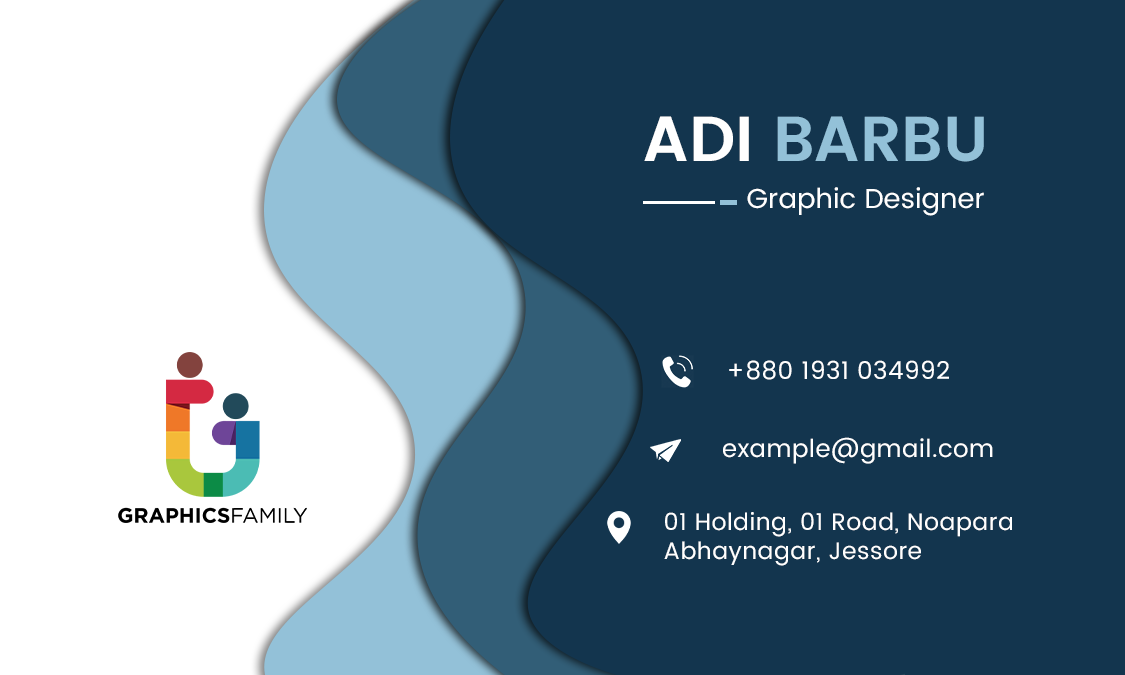
<style>
.page{position:relative;width:1125px;height:675px;background:#13354e}
.page>*{position:absolute;margin:0}
.t1{font:63.5px "Poppins-SemiBold";color:#93c1d8;text-transform:uppercase}
.t2{font:63.5px "Poppins-SemiBold";color:#ffffff;text-transform:uppercase}
.t3{font:27.4px "Poppins-Regular";color:#ffffff}
.t4{font:24.5px "Poppins-Regular";letter-spacing:0.02em;color:#ffffff}
.t5{font:23.8px "Poppins-Regular";letter-spacing:0.02em;color:#ffffff}
</style>
<div class="page">
<p class="t1" style="left:644px;top:116px;width:340px;height:46px"><span class="t2">Adi </span>Barbu</p>
<p class="t3" style="left:747px;top:187px;width:237px;height:29px">Graphic Designer</p>
<p class="t4" style="left:729px;top:360px;width:220px;height:20px">+880 1931 034992</p>
<p class="t4" style="left:723px;top:437px;width:270px;height:27px">example@gmail.com</p>
<p class="t5" style="left:664px;top:512px;width:348px;height:54px">01 Holding, 01 Road, Noapara <br>Abhaynagar, Jessore</p>
</div>
